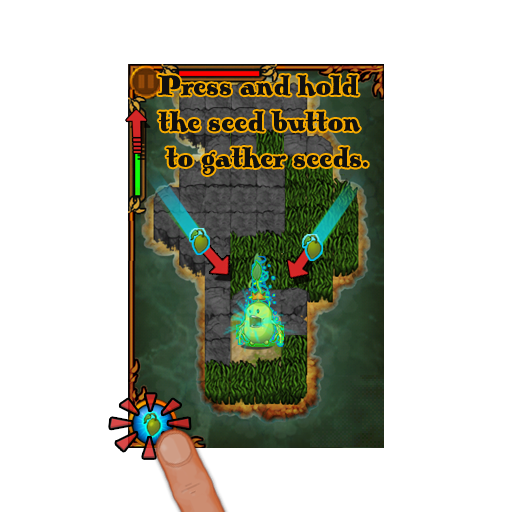
<style>
.page{position:relative;width:512px;height:512px;background:#ffffff}
.page>*{position:absolute;margin:0}
.t1{font:30px "PickworthOldStylePro";color:#101010}
</style>
<div class="page">
<p class="t1" style="left:158px;top:75px;width:210px;height:100px">Press and hold <br>the seed button<br> to gather seeds.</p>
</div>
